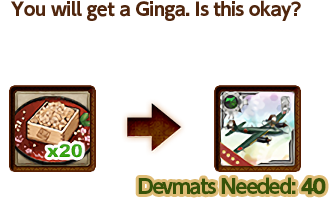
<style>
.page{position:relative;width:331px;height:202px;background:#ffffff}
.page>*{position:absolute;margin:0}
.t1{font:18px "UDShinGoPro-Bold";letter-spacing:-0.04em;color:#50260d}
.t2{font:20px "UDShinGoPro-Bold";letter-spacing:-0.08em;color:#375309}
.t3{font:20px "UDShinGoPro-Bold";letter-spacing:-0.08em;color:#375309;font-weight:bold}
</style>
<div class="page">
<p class="t1" style="left:11px;top:0px;width:290px;height:21px">You will get a Ginga. Is this okay?</p>
<p class="t2" style="left:138px;top:177px;width:188px;height:18px">Devmats Needed: <span class="t3">40</span></p>
</div>
